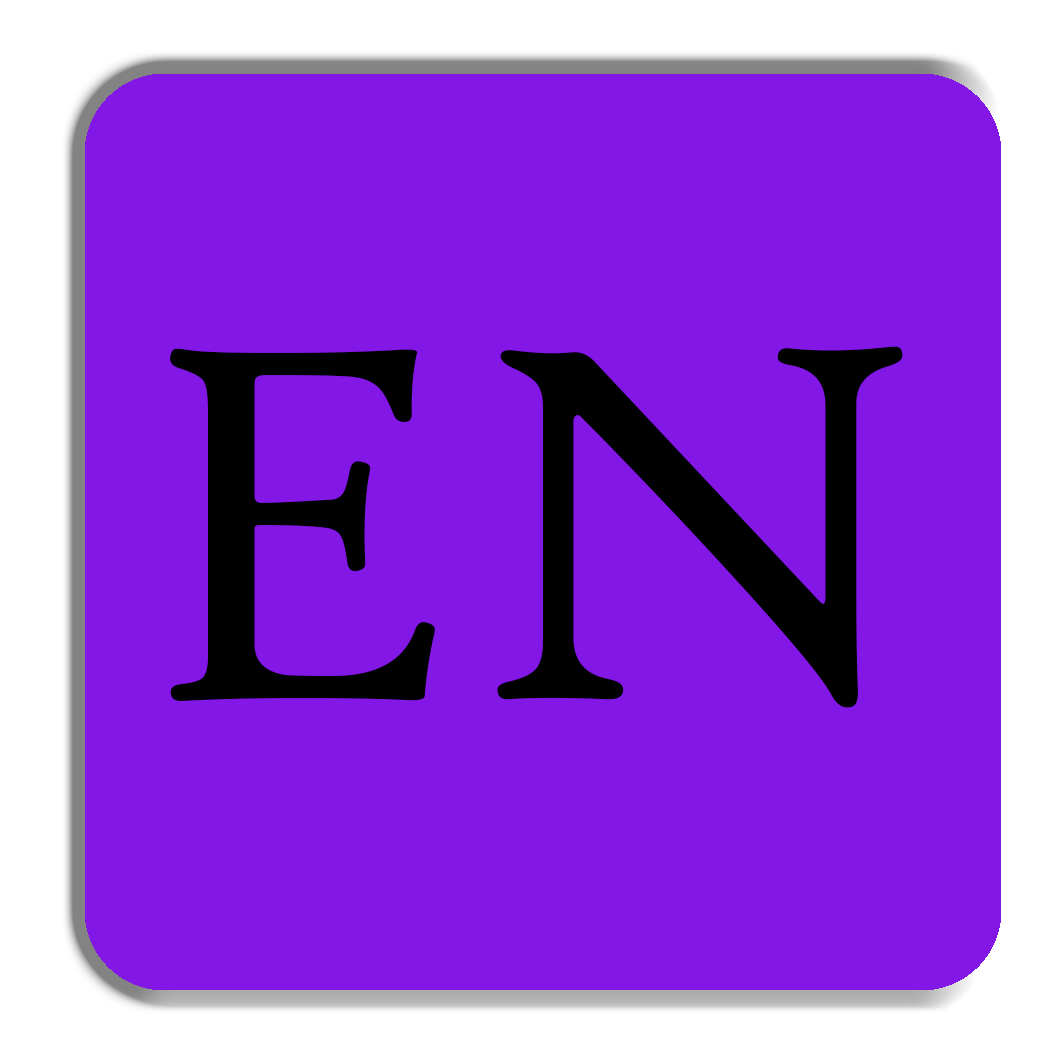
<style>
.page{position:relative;width:1063px;height:1063px;background:#8217e6}
.page>*{position:absolute;margin:0}
.t1{font:541.7px "HighTowerText-Reg";color:#000000}
</style>
<div class="page">
<p class="t1" style="left:170px;top:346px;width:733px;height:362px">EN</p>
</div>
